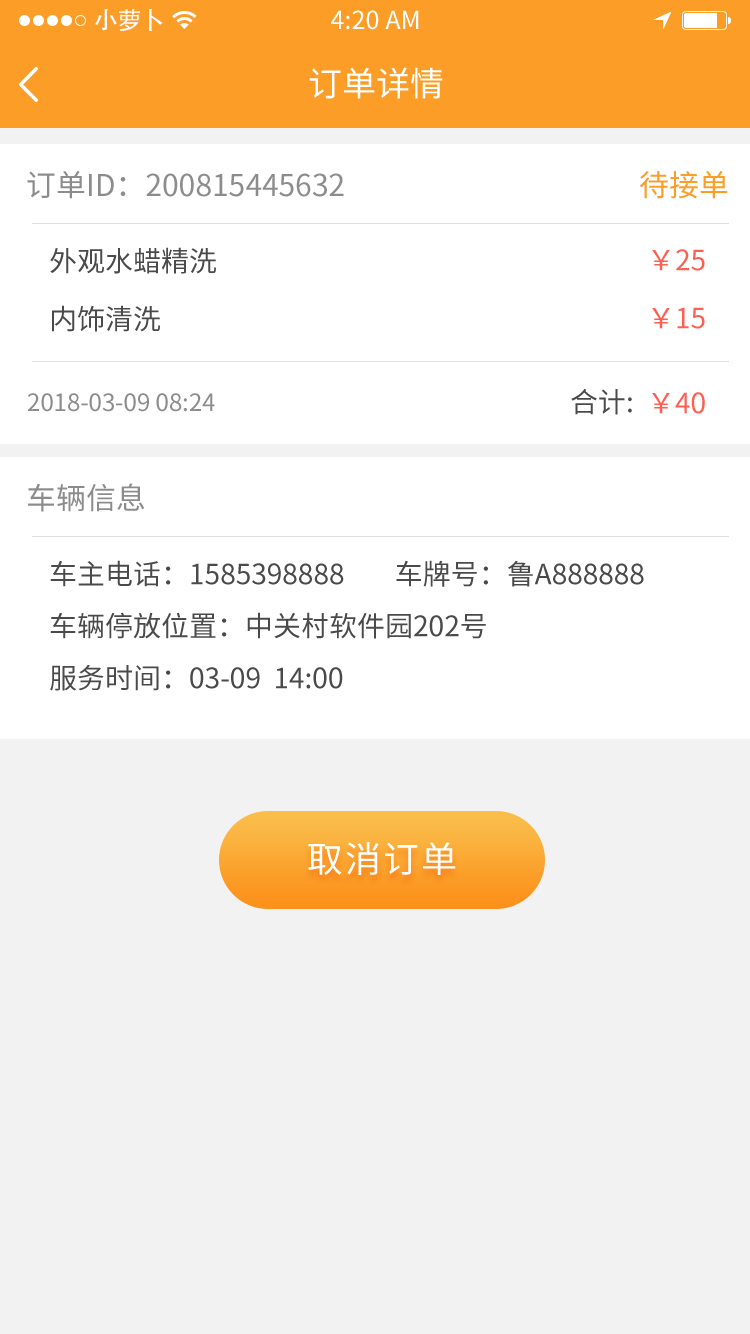
<style>
.page{position:relative;width:750px;height:1334px;background:#f2f2f2}
.page>*{position:absolute;margin:0}
.t1{font:24px "AdobeHeitiStd-Regular";color:#ffffff}
.t2{font:25px "SourceHanSansCN-Regular";color:#ffffff}
.t3{font:34px "SourceHanSansCN-Regular";color:#ffffff}
.t4{font:30px "SourceHanSansCN-Regular";color:#8c8c8c}
.t5{font:30px "SourceHanSansCN-Regular";color:#fb9d27}
.t6{font:28px/58px "SourceHanSansCN-Regular";color:#4a4a4a}
.t7{font:28px/58px "SourceHanSansCN-Regular";color:#ff5f52}
.t8{font:28px "SourceHanSansCN-Regular";color:#4a4a4a}
.t9{font:24px "SourceHanSansCN-Regular";color:#8c8c8c}
.t10{font:28px "SourceHanSansCN-Regular";color:#ff5f52}
.t11{font:28px/52px "SourceHanSansCN-Regular";color:#4a4a4a}
.t12{font:36px "SourceHanSansCN-Regular";letter-spacing:0.06em;color:#ffffff}
</style>
<div class="page">
<p class="t1" style="left:95px;top:9px;width:68px;height:22px">小萝卜</p>
<p class="t2" style="left:331px;top:10px;width:88px;height:20px">4:20 AM</p>
<p class="t3" style="left:309px;top:67px;width:134px;height:32px">订单详情</p>
<p class="t4" style="left:27px;top:171px;width:317px;height:28px">订单ID：200815445632</p>
<p class="t5" style="left:639px;top:171px;width:89px;height:28px">待接单</p>
<p class="t6" style="left:50px;top:247px;width:166px;height:85px">外观水蜡精洗<br>内饰清洗</p>
<p class="t7" style="left:652px;top:249px;width:53px;height:80px;text-align:right">￥25<br>￥15</p>
<p class="t8" style="left:571px;top:388px;width:61px;height:27px">合计:</p>
<p class="t9" style="left:28px;top:393px;width:187px;height:19px">2018-03-09 08:24</p>
<p class="t10" style="left:652px;top:392px;width:53px;height:22px">￥40</p>
<p class="t4" style="left:28px;top:483px;width:117px;height:29px">车辆信息</p>
<p class="t11" style="left:50px;top:560px;width:594px;height:131px">车主电话：1585398888        车牌号：鲁A888888<br>车辆停放位置：中关村软件园202号<br>服务时间：03-09  14:00</p>
<p class="t12" style="left:308px;top:842px;width:148px;height:33px">取消订单</p>
</div>
